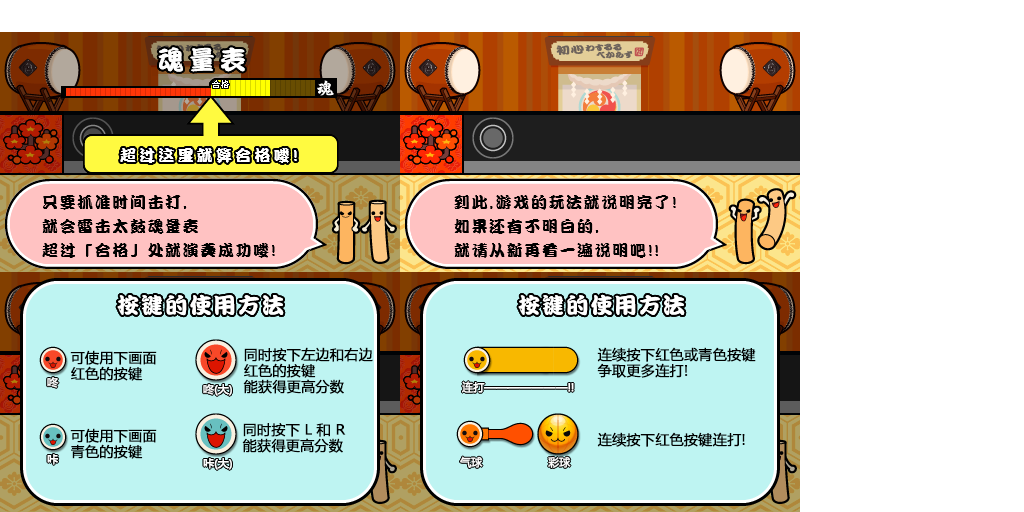
<style>
.page{position:relative;width:1024px;height:512px;background:#ffffff}
.page>*{position:absolute;margin:0}
.t1{font:26px "DFPKanTingLiuW9";letter-spacing:0.2em;color:#ffffff}
.t2{font:8px "MicrosoftYaHei";letter-spacing:0.1em;color:#ffffff}
.t3{font:16px "DFPKanTingLiuW9";letter-spacing:0.2em;color:#ffffff}
.t4{font:16px/24px "DFPKanTingLiuW9";letter-spacing:0.1em;color:#000000}
.t5{font:22px "DFPKanTingLiuW9";letter-spacing:0.1em;color:#ffffff}
.t6{font:14px/16px "MicrosoftYaHei";color:#000000;font-weight:bold}
.t7{font:11px "MicrosoftYaHei";color:#ffffff;font-weight:bold}
.t8{font:14px "MicrosoftYaHei";color:#000000;font-weight:bold}
</style>
<div class="page">
<p class="t1" style="left:158px;top:47px;width:87px;height:25px">魂量表</p>
<p class="t2" style="left:212px;top:80px;width:17px;height:8px">合格</p>
<p class="t3" style="left:120px;top:148px;width:177px;height:15px">超过这里就算合格喽!</p>
<p class="t4" style="left:42px;top:195px;width:233px;height:63px">只要抓准时间击打,<br>就会雷击太鼓魂量表<br>超过「合格」处就演奏成功喽!</p>
<p class="t4" style="left:454px;top:195px;width:222px;height:63px">到此,游戏的玩法就说明完了!<br>如果还有不明白的,<br>就请从新再看一遍说明吧!!</p>
<p class="t5" style="left:117px;top:294px;width:167px;height:22px">按键的使用方法</p>
<p class="t5" style="left:518px;top:294px;width:167px;height:22px">按键的使用方法</p>
<p class="t6" style="left:70px;top:350px;width:87px;height:31px">可使用下画面<br>红色的按键</p>
<p class="t6" style="left:243px;top:347px;width:130px;height:47px">同时按下左边和右边<br>红色的按键<br>能获得更高分数</p>
<p class="t6" style="left:597px;top:347px;width:159px;height:31px">连续按下红色或青色按键<br>争取更多连打!</p>
<p class="t7" style="left:47px;top:377px;width:12px;height:11px">咚</p>
<p class="t7" style="left:203px;top:384px;width:29px;height:12px">咚(大)</p>
<p class="t7" style="left:462px;top:381px;width:112px;height:12px">连打———————!!</p>
<p class="t6" style="left:242px;top:423px;width:104px;height:30px">同时按下 L 和 R<br>能获得更高分数</p>
<p class="t6" style="left:70px;top:428px;width:87px;height:31px">可使用下画面<br>青色的按键</p>
<p class="t8" style="left:597px;top:432px;width:148px;height:15px">连续按下红色按键连打!</p>
<p class="t7" style="left:47px;top:454px;width:12px;height:11px">咔</p>
<p class="t7" style="left:203px;top:458px;width:29px;height:12px">咔(大)</p>
<p class="t7" style="left:460px;top:456px;width:23px;height:12px">气球</p>
<p class="t7" style="left:548px;top:456px;width:23px;height:12px">彩球</p>
</div>
